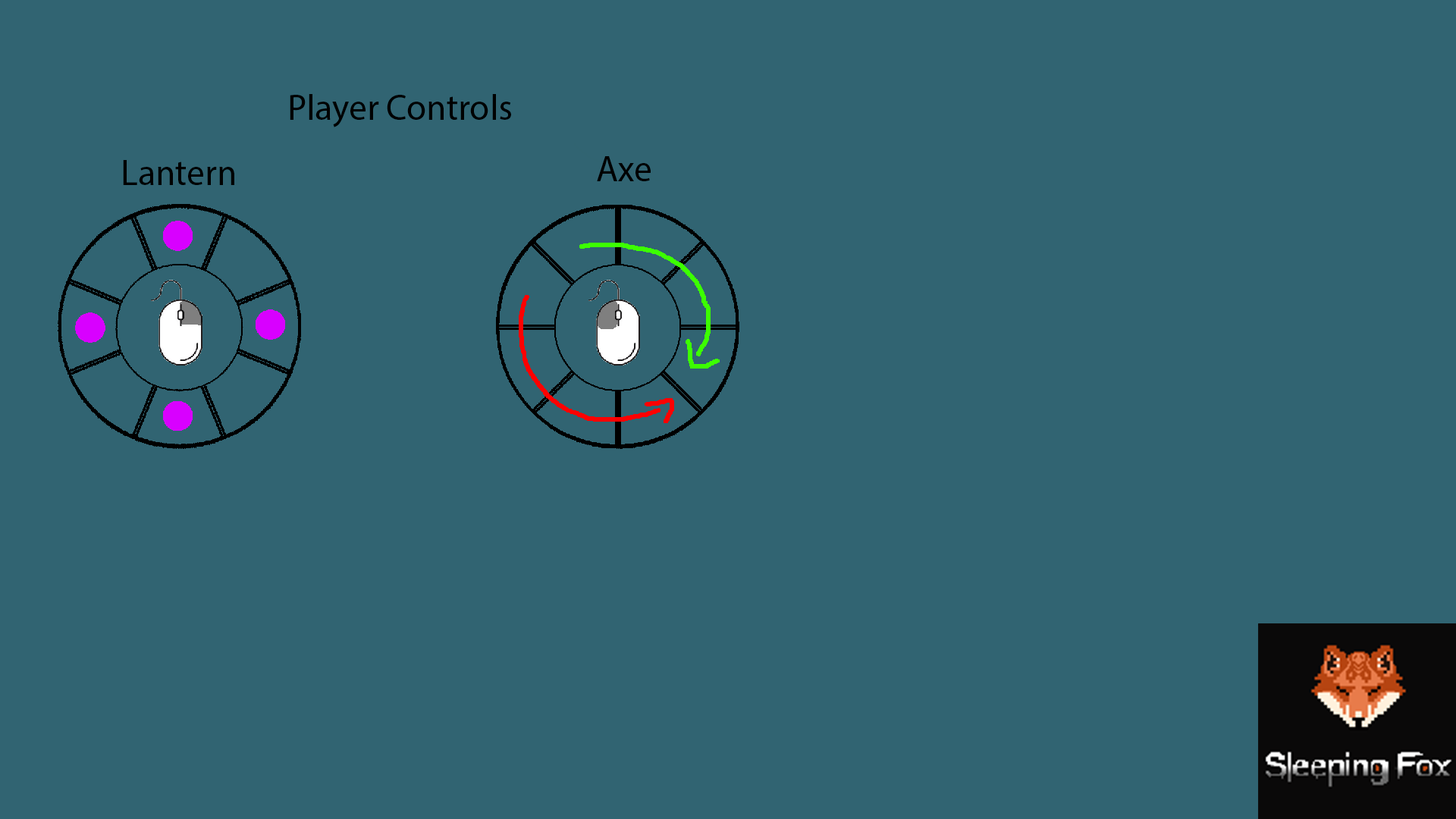
<style>
.page{position:relative;width:1456px;height:819px;background:#316472}
.page>*{position:absolute;margin:0}
.t1{font:36.1px "MyriadPro-Regular";color:#000000}
</style>
<div class="page">
<p class="t1" style="left:290px;top:94px;width:221px;height:33px">Player Controls</p>
<p class="t1" style="left:123px;top:160px;width:111px;height:25px">Lantern</p>
<p class="t1" style="left:597px;top:156px;width:54px;height:25px">Axe</p>
</div>
